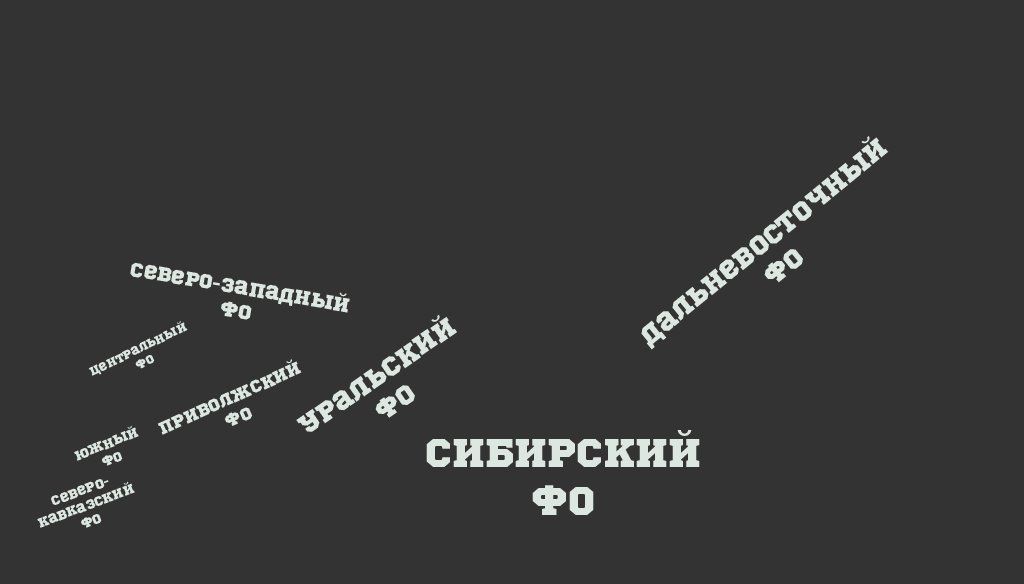
<style>
.page{position:relative;width:1024px;height:584px;background:#333333}
.page>*{position:absolute;margin:0}
.t1{font:26.7px "SportsWorld";color:#dce7e1}
.t2{font:20px "SportsWorld";color:#dce7e1}
.t3{font:12px "SportsWorld";color:#dce7e1}
.t4{font:17.3px "SportsWorld";color:#dce7e1}
.t5{font:13.3px "SportsWorld";color:#dce7e1}
.t6{font:40px "SportsWorld";color:#dce7e1}
</style>
<div class="page">
<p class="t1" style="left:641px;top:136px;width:248px;height:214px;text-align:center;rotate:-39deg">Дальневосточный<br>ФО</p>
<p class="t2" style="left:130px;top:262px;width:220px;height:58px;text-align:center;rotate:10deg">Северо-западный<br>ФО</p>
<p class="t1" style="left:296px;top:314px;width:161px;height:118px;text-align:center;rotate:-35deg">Уральский<br>ФО</p>
<p class="t3" style="left:88px;top:321px;width:100px;height:55px;text-align:center;rotate:-26deg">Центральный<br>ФО</p>
<p class="t4" style="left:157px;top:359px;width:145px;height:76px;text-align:center;rotate:-24deg">Приволжский<br>ФО</p>
<p class="t5" style="left:74px;top:425px;width:65px;height:41px;text-align:center;rotate:-22deg">Южный<br>ФО</p>
<p class="t6" style="left:426px;top:430px;width:274px;height:85px;text-align:center">Сибирский<br>ФО</p>
<p class="t5" style="left:37px;top:479px;width:98px;height:49px;text-align:center;rotate:-20deg">Северо-<br>Кавказский<br>ФО</p>
</div>
